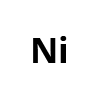
<style>
.page{position:relative;width:100px;height:100px;background:#ffffff}
.page>*{position:absolute;margin:0}
.t1{font:35px "OpenSans-Bold";color:#000000}
</style>
<div class="page">
<p class="t1" style="left:33px;top:36px;width:34px;height:27px">Ni</p>
</div>
